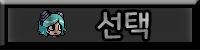
<style>
.page{position:relative;width:200px;height:50px;background:#000000}
.page>*{position:absolute;margin:0}
.t1{font:30px "MaplestoryLight"}
</style>
<div class="page">
<p class="t1" style="left:97px;top:12px;width:52px;height:27px">선택</p>
</div>
